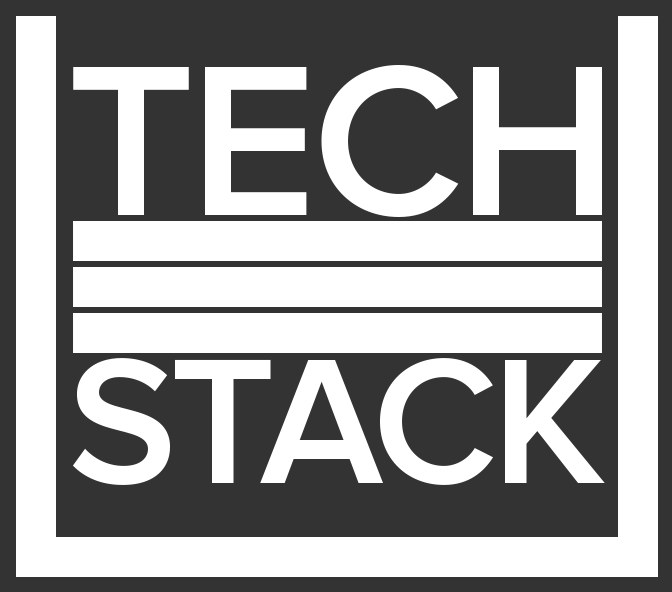
<style>
.page{position:relative;width:672px;height:592px;background:#333333}
.page>*{position:absolute;margin:0}
.t1{font:221.4px "ProximaNova-Semibold";letter-spacing:-0.025em;color:#ffffff}
.t2{font:183.9px "ProximaNova-Semibold";letter-spacing:-0.025em;color:#ffffff}
</style>
<div class="page">
<p class="t1" style="left:73px;top:65px;width:529px;height:152px">TECH</p>
<p class="t2" style="left:72px;top:358px;width:533px;height:127px">STACK</p>
</div>
